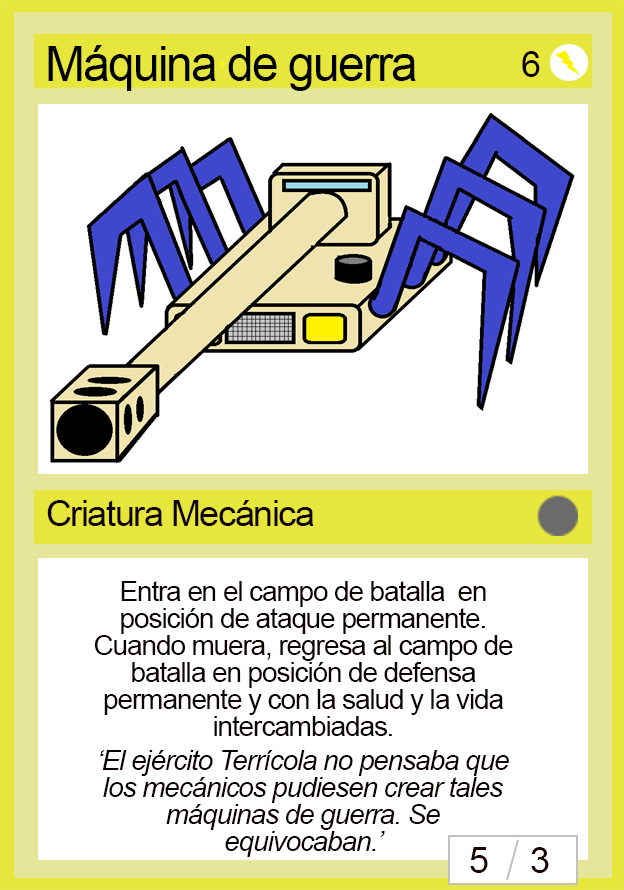
<style>
.page{position:relative;width:624px;height:890px;background:#ffffff}
.page>*{position:absolute;margin:0}
.t1{font:48px "ArialMT";letter-spacing:-0.04em;color:#010100}
.t2{font:36px "ArialMT";letter-spacing:-0.04em;color:#0d0202}
.t3{font:28px/27px "ArialMT";letter-spacing:-0.04em;color:#0d0202}
.t4{font:28px/27px "Arial-ItalicMT";letter-spacing:-0.04em;color:#0d0202}
.t5{font:36px "ArialMT";letter-spacing:-0.04em;color:#1d0202}
</style>
<div class="page">
<p class="t1" style="left:48px;top:45px;width:368px;height:46px">Máquina de guerra</p>
<p class="t2" style="left:522px;top:51px;width:18px;height:26px">6</p>
<p class="t2" style="left:47px;top:500px;width:267px;height:26px">Criatura Mecánica</p>
<p class="t3" style="left:94px;top:581px;width:419px;height:155px;text-align:center">Entra en el campo de batalla  en posición de ataque permanente. Cuando muera, regresa al campo de batalla en posición de defensa permanente y con la salud y la vida intercambiadas.</p>
<p class="t4" style="left:100px;top:750px;width:409px;height:107px;text-align:center">‘El ejército Terrícola no pensaba que los mecánicos pudiesen crear tales máquinas de guerra. Se equivocaban.’</p>
<p class="t5" style="left:470px;top:847px;width:18px;height:26px">5</p>
<p class="t5" style="left:531px;top:847px;width:18px;height:26px">3</p>
</div>
